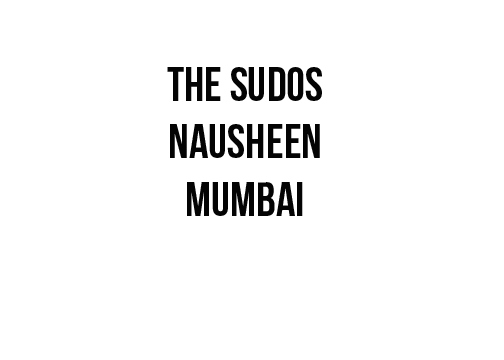
<style>
.page{position:relative;width:504px;height:360px;background:#ffffff}
.page>*{position:absolute;margin:0}
.t1{font:48px "BebasNeueBold";color:#040404}
</style>
<div class="page">
<p class="t1" style="left:167px;top:67px;width:155px;height:149px;text-align:center">the sudos<br>nausheen<br>mumbai</p>
</div>
